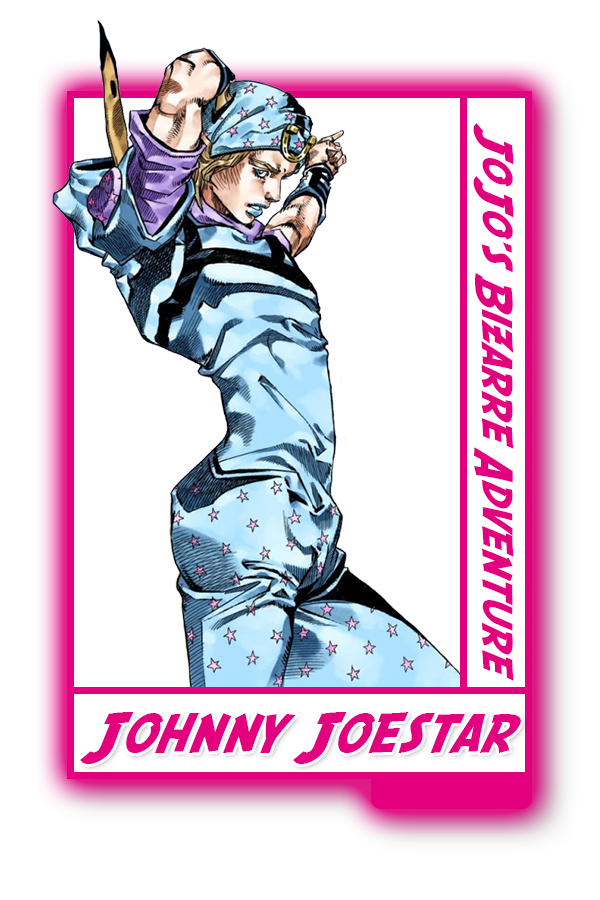
<style>
.page{position:relative;width:600px;height:900px;background:#ffffff}
.page>*{position:absolute;margin:0}
.t1{font:42.4px "SFFedora";color:#e3007e}
.t2{font:55.4px "SFFedora";color:#e3007e}
</style>
<div class="page">
<p class="t1" style="left:473px;top:123px;width:41px;height:558px;rotate:90deg">JoJo's Bizarre Adventure</p>
<p class="t2" style="left:80px;top:712px;width:441px;height:52px">Johnny Joestar</p>
</div>
